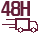
<style>
.page{position:relative;width:40px;height:40px;background:#ffffff}
.page>*{position:absolute;margin:0}
.t1{font:18px "Unispace-Bold";letter-spacing:-0.075em;color:#651e38}
</style>
<div class="page">
<p class="t1" style="left:1px;top:1px;width:29px;height:15px">48H</p>
</div>
